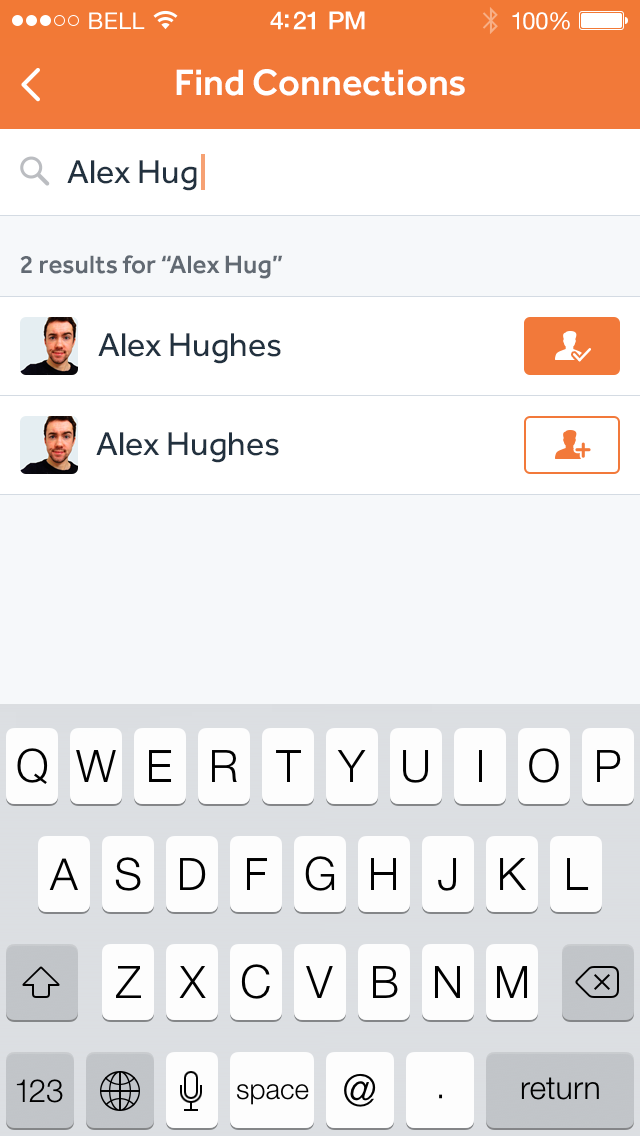
<style>
.page{position:relative;width:640px;height:1136px;background:#f6f8fa}
.page>*{position:absolute;margin:0}
.t1{font:23px "HelveticaNeue";letter-spacing:0.02em;color:#ffffff}
.t2{font:25px "HelveticaNeue-Medium";letter-spacing:-0.02em;color:#ffffff}
.t3{font:24px "HelveticaNeue";letter-spacing:-0.02em;color:#ffffff}
.t4{font:38px "Effra-Medium";color:#ffffff}
.t5{font:34px "Effra-Regular";color:#22313f}
.t6{font:26px "Effra-Medium";color:#626a73}
</style>
<div class="page">
<p class="t1" style="left:89px;top:12px;width:56px;height:17px">BELL</p>
<p class="t2" style="left:270px;top:11px;width:95px;height:19px">4:21 PM</p>
<p class="t3" style="left:512px;top:12px;width:58px;height:18px">100%</p>
<p class="t4" style="left:176px;top:69px;width:289px;height:27px">Find Connections</p>
<p class="t5" style="left:67px;top:160px;width:130px;height:31px">Alex Hug</p>
<p class="t6" style="left:20px;top:255px;width:263px;height:24px">2 results for “Alex Hug”</p>
<p class="t5" style="left:98px;top:333px;width:183px;height:31px">Alex Hughes</p>
<p class="t5" style="left:96px;top:432px;width:183px;height:31px">Alex Hughes</p>
</div>
